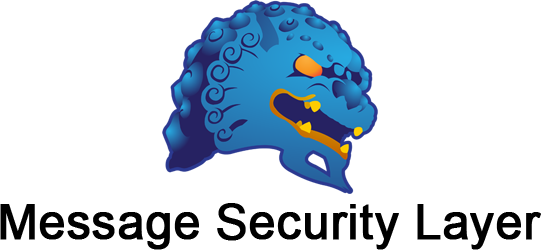
<style>
.page{position:relative;width:541px;height:250px;background:#ffffff}
.page>*{position:absolute;margin:0}
.t1{font:48px "ArialMT";color:#000000;font-weight:bold}
</style>
<div class="page">
<p class="t1" style="left:0px;top:203px;width:541px;height:47px">Message Security Layer</p>
</div>
